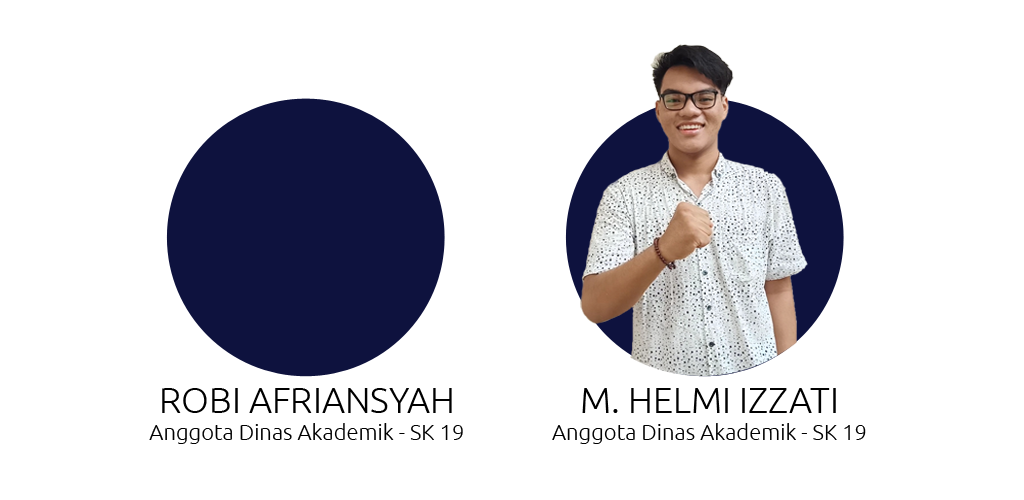
<style>
.page{position:relative;width:1024px;height:500px;background:#ffffff}
.page>*{position:absolute;margin:0}
.t1{font:22px "Ubuntu-Light";color:#000000}
.t2{font:36px "Ubuntu-Light";color:#000000}
</style>
<div class="page">
<p class="t1" style="left:149px;top:388px;width:314px;height:56px;text-align:center"><span class="t2">ROBI AFRIANSYAH<br></span>Anggota Dinas Akademik - SK 19</p>
<p class="t1" style="left:552px;top:388px;width:314px;height:56px;text-align:center"><span class="t2">M. HELMI IZZATI<br></span>Anggota Dinas Akademik - SK 19</p>
</div>
